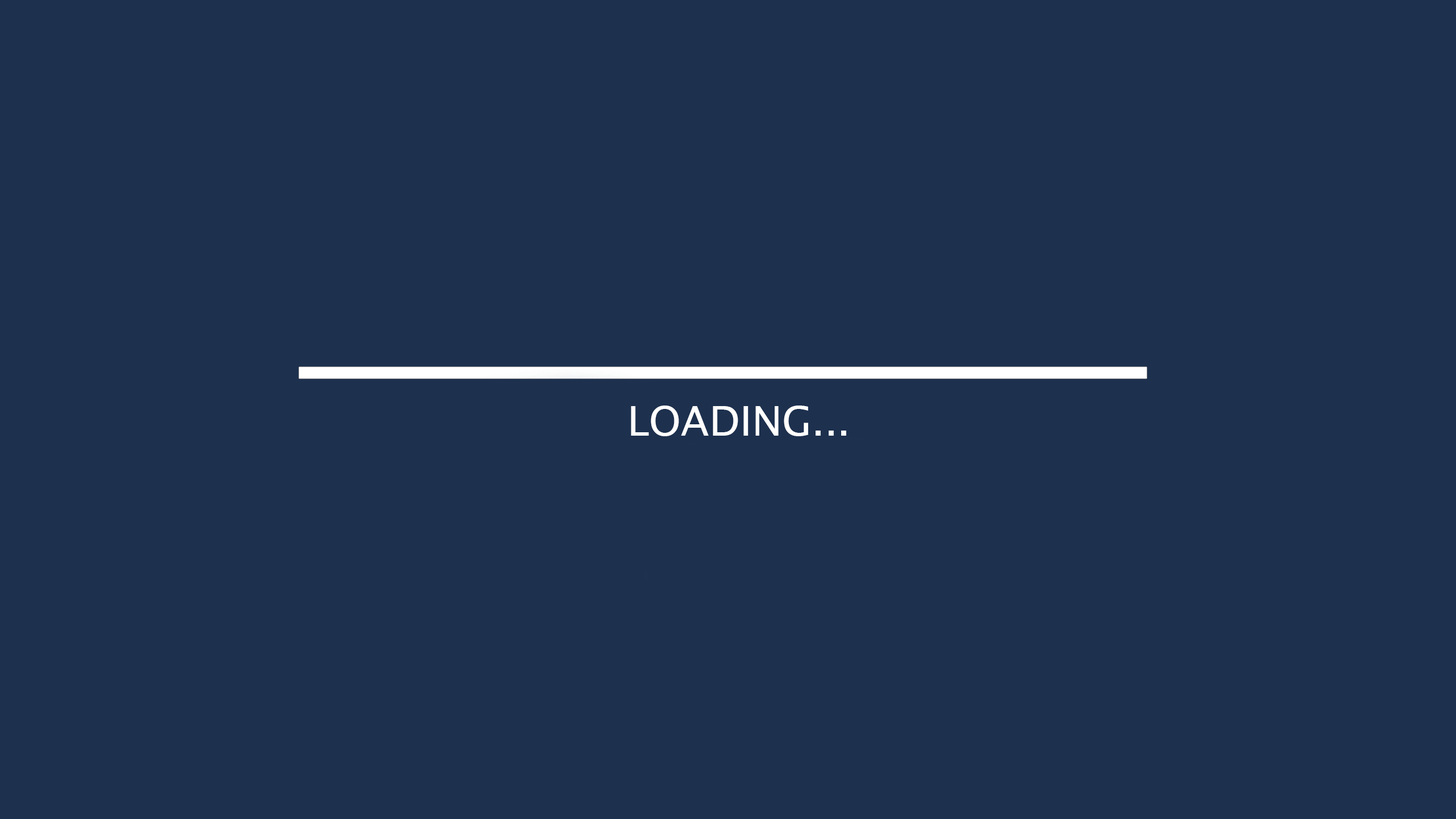
<style>
.page{position:relative;width:1456px;height:819px;background:#1d304e}
.page>*{position:absolute;margin:0}
.t1{font:40.9px "LucidaSansUnicode";color:#ffffff}
</style>
<div class="page">
<p class="t1" style="left:631px;top:406px;width:215px;height:30px">LOADING...</p>
</div>
